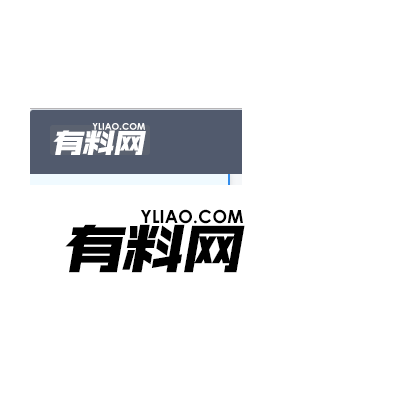
<style>
.page{position:relative;width:420px;height:400px;background:#ffffff}
.page>*{position:absolute;margin:0}
.t1{font:9.3px "CenturyGothic-Bold";color:#ffffff}
.t2{font:28.4px "ReeJi-BigRuixain-BoldGBV1.0-Regular";color:#ffffff;scale:1.09 1}
.t3{font:18px "CenturyGothic-Bold";color:#000000}
.t4{font:55.1px "ReeJi-BigRuixain-BoldGBV1.0-Regular";color:#000000;scale:1.09 1}
</style>
<div class="page">
<p class="t1" style="left:92px;top:123px;width:53px;height:7px">YLIAO.COM</p>
<p class="t2" style="left:53px;top:130px;width:93px;height:25px">有料网</p>
<p class="t3" style="left:141px;top:209px;width:102px;height:15px">YLIAO.COM</p>
<p class="t4" style="left:65px;top:224px;width:180px;height:49px">有料网</p>
</div>
